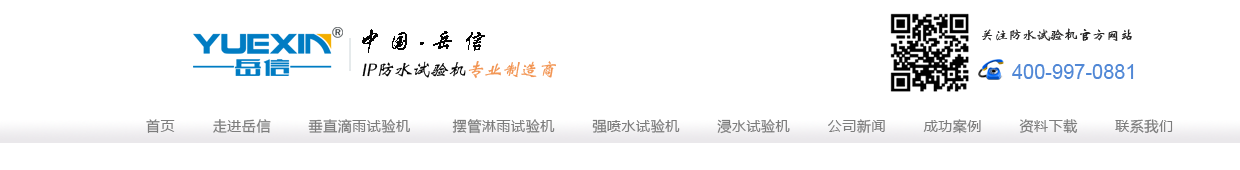
<style>
.page{position:relative;width:1240px;height:170px;background:#ffffff}
.page>*{position:absolute;margin:0}
.t1{font:24px "STXingkai";color:#060606;font-style:italic}
.t2{font:14px "STXinwei";color:#272626}
.t3{font:30px "STXinwei";color:#060606;font-style:italic}
.t4{font:18px "FZWBJW--GB1-0";color:#060606;font-style:italic}
.t5{font:18px "FZWBJW--GB1-0";color:#f29655;font-style:italic}
.t6{font:20px "ArialMT";color:#5188d6}
.t7{font:14px "MicrosoftYaHei";letter-spacing:0.04em;color:#7c7c7c}
</style>
<div class="page">
<p class="t1" style="left:362px;top:29px;width:123px;height:24px">中 国   岳 信</p>
<p class="t2" style="left:982px;top:28px;width:150px;height:13px">关注防水试验机官方网站</p>
<p class="t3" style="left:420px;top:42px;width:4px;height:3px">.</p>
<p class="t4" style="left:362px;top:61px;width:194px;height:18px">IP防水试验机<span class="t5">专业制造商</span></p>
<p class="t6" style="left:1012px;top:64px;width:122px;height:15px">400-997-0881</p>
<p class="t7" style="left:146px;top:119px;width:1027px;height:15px">首页        走进岳信        垂直滴雨试验机         摆管淋雨试验机        强喷水试验机        浸水试验机        公司新闻        成功案例        资料下载        联系我们</p>
</div>
